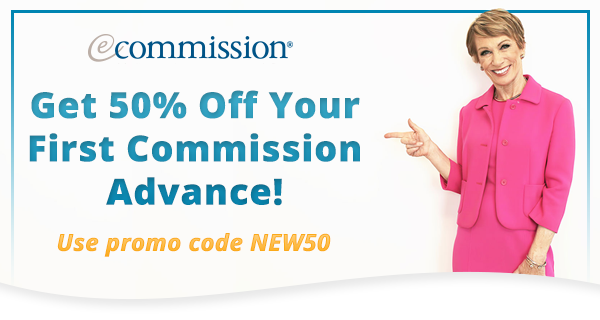
<style>
.page{position:relative;width:600px;height:320px;background:#fcfcfc}
.page>*{position:absolute;margin:0}
.t1{font:36px "OpenSans-Extrabold";color:#208fb0;font-weight:bold}
.t2{font:23.5px "OpenSans-BoldItalic";font-weight:bold}
</style>
<div class="page">
<p class="t1" style="left:29px;top:90px;width:331px;height:116px;text-align:center">Get 50% Off Your<br>First Commission<br>Advance!</p>
<p class="t2" style="left:57px;top:233px;width:274px;height:24px">Use promo code NEW50</p>
</div>
